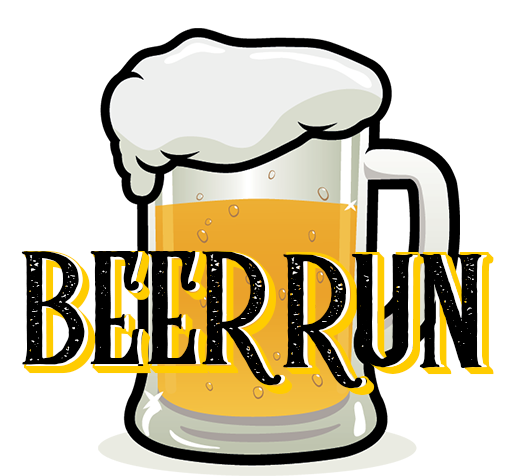
<style>
.page{position:relative;width:514px;height:476px;background:#ffffff}
.page>*{position:absolute;margin:0}
.t1{font:150px "RumbleBraveRough";color:#000000}
.t2{font:150px "RumbleBraveshadow3D";color:#ffcc00}
.t3{font:150px "RumbleBraveoutline"}
</style>
<div class="page">
<p class="t1" style="left:21px;top:251px;width:261px;height:135px">BEER</p>
<p class="t2" style="left:23px;top:251px;width:270px;height:143px">BEER</p>
<p class="t3" style="left:26px;top:252px;width:259px;height:133px">BEER</p>
<p class="t1" style="left:283px;top:253px;width:199px;height:136px">RUN</p>
<p class="t2" style="left:286px;top:252px;width:208px;height:143px">RUN</p>
<p class="t3" style="left:287px;top:255px;width:200px;height:133px">RUN</p>
</div>
